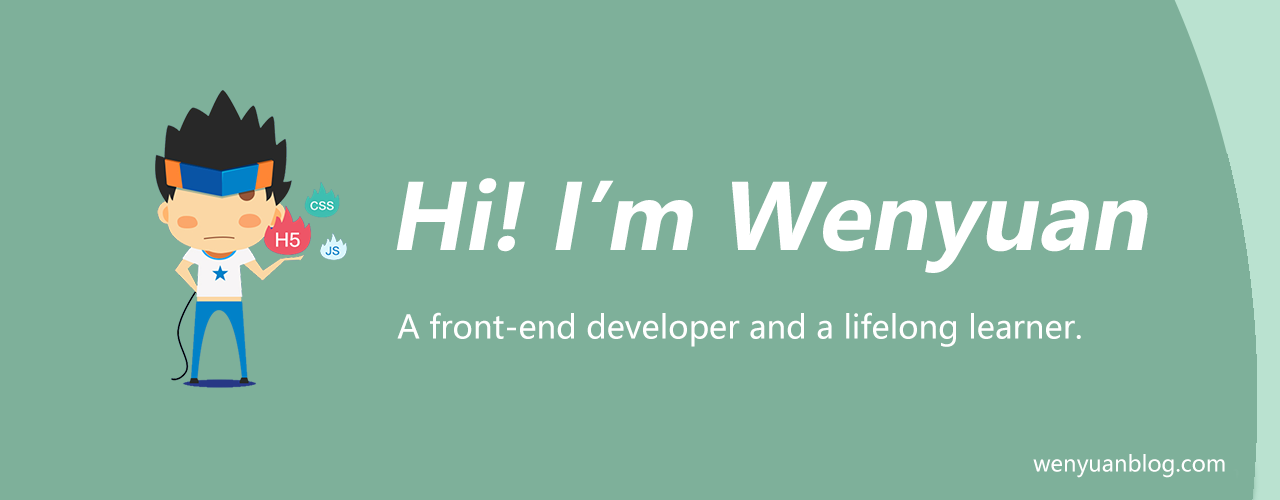
<style>
.page{position:relative;width:1280px;height:500px;background:#7eb09a}
.page>*{position:absolute;margin:0}
.t1{font:90px "MicrosoftYaHeiUI-Bold";color:#ffffff;font-style:italic}
.t2{font:32px "MicrosoftYaHeiUI";color:#ffffff}
.t3{font:22px "MicrosoftYaHeiUI";color:#ffffff}
</style>
<div class="page">
<p class="t1" style="left:396px;top:178px;width:752px;height:95px">Hi! I’m Wenyuan</p>
<p class="t2" style="left:397px;top:312px;width:684px;height:35px">A front-end developer and a lifelong learner.</p>
<p class="t3" style="left:1033px;top:454px;width:192px;height:24px">wenyuanblog.com</p>
</div>
